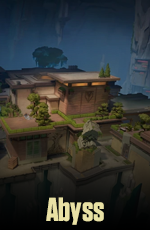
<style>
.page{position:relative;width:150px;height:230px}
.page>*{position:absolute;margin:0}
.t1{font:33.3px "Tungsten-Bold";color:#e9e1a5}
</style>
<div class="page">
<p class="t1" style="left:46px;top:197px;width:58px;height:28px">Abyss</p>
</div>
